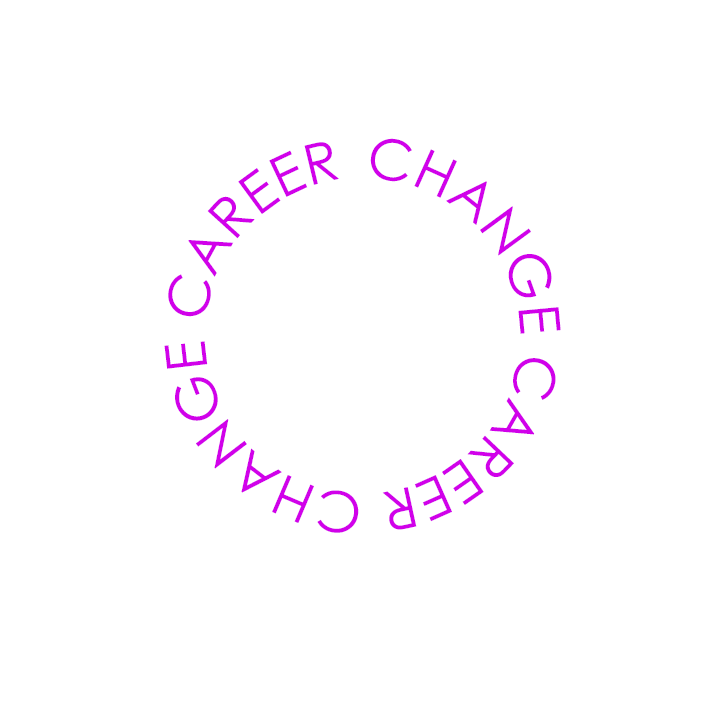
<style>
.page{position:relative;width:720px;height:720px;background:#ffffff}
.page>*{position:absolute;margin:0}
.t1{font:56px "CenturyGothic";color:#d101ea}
</style>
<div class="page">
<p class="t1" style="left:164px;top:138px;width:397px;height:395px">CHANGE CAREER CHANGE CAREER</p>
</div>
